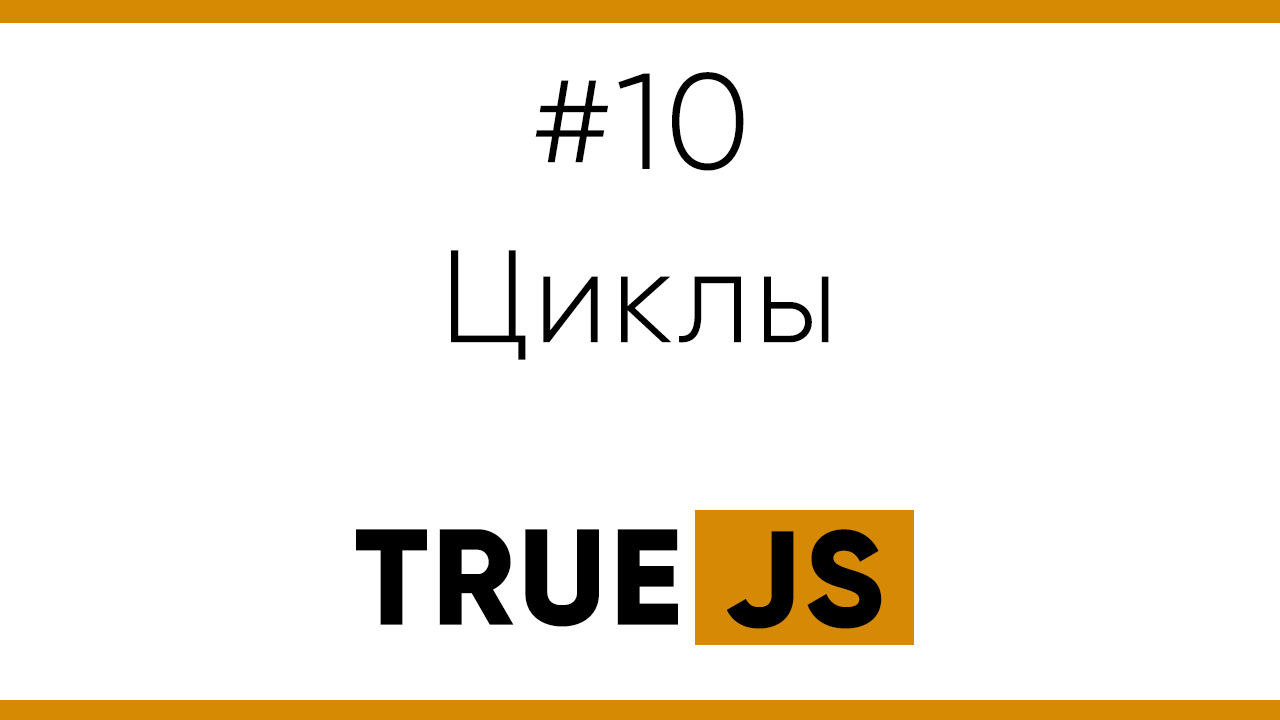
<style>
.page{position:relative;width:1280px;height:720px;background:#ffffff}
.page>*{position:absolute;margin:0}
.t1{font:136px "Gilroy-Light";letter-spacing:0.025em;color:#000000}
.t2{font:131px "Gilroy-Light";letter-spacing:0.025em;color:#000000}
.t3{font:136px "Gilroy-ExtraBold";letter-spacing:0.025em;color:#000000}
</style>
<div class="page">
<p class="t1" style="left:535px;top:72px;width:209px;height:99px">#10</p>
<p class="t2" style="left:451px;top:250px;width:378px;height:110px">Циклы</p>
<p class="t3" style="left:356px;top:529px;width:322px;height:98px">TRUE</p>
<p class="t3" style="left:726px;top:529px;width:156px;height:100px">JS</p>
</div>
